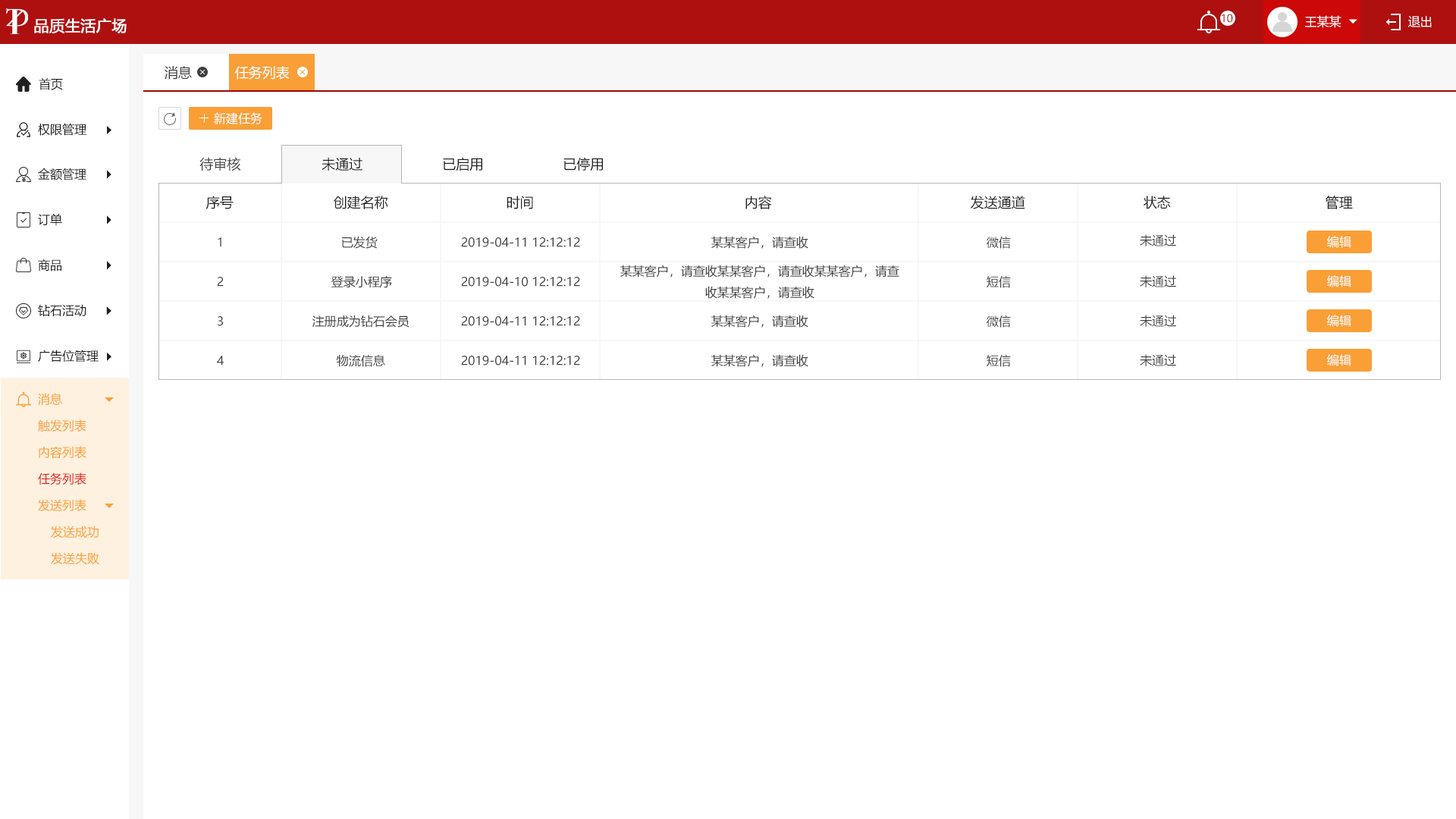
<style>
.page{position:relative;width:1456px;height:819px;background:#ffffff}
.page>*{position:absolute;margin:0}
.t1{font:10.6px "MicrosoftYaHei";color:#9c0606;text-transform:uppercase}
.t2{font:12.1px "MicrosoftYaHei";color:#ffffff;text-transform:uppercase}
.t3{font:15.2px "MicrosoftYaHei";color:#ffffff;text-transform:uppercase;font-weight:bold}
.t4{font:13.6px "MicrosoftYaHei";color:#404040;text-transform:uppercase}
.t5{font:13.6px "MicrosoftYaHei";color:#ffffff;text-transform:uppercase}
.t6{font:12.1px "MicrosoftYaHei";color:#202020;text-transform:uppercase}
.t7{font:13.6px "MicrosoftYaHei";color:#202020;text-transform:uppercase}
.t8{font:12.1px "MicrosoftYaHei";color:#404040;text-transform:uppercase}
.t9{font:12.1px "MicrosoftYaHei";color:#f99f36;text-transform:uppercase}
.t10{font:12.1px "MicrosoftYaHei";color:#e61f18;text-transform:uppercase}
</style>
<div class="page">
<p class="t1" style="left:1222px;top:14px;width:11px;height:9px">10</p>
<p class="t2" style="left:1305px;top:15px;width:36px;height:13px">王某某</p>
<p class="t2" style="left:1408px;top:16px;width:24px;height:11px">退出</p>
<p class="t3" style="left:34px;top:18px;width:93px;height:15px">品质生活广场</p>
<p class="t4" style="left:165px;top:66px;width:27px;height:14px">消息</p>
<p class="t5" style="left:234px;top:66px;width:56px;height:14px">任务列表</p>
<p class="t6" style="left:39px;top:78px;width:24px;height:12px">首页</p>
<p class="t2" style="left:214px;top:112px;width:48px;height:13px">新建任务</p>
<p class="t6" style="left:38px;top:123px;width:48px;height:13px">权限管理</p>
<p class="t4" style="left:199px;top:157px;width:42px;height:14px">待审核</p>
<p class="t7" style="left:322px;top:157px;width:40px;height:14px">未通过</p>
<p class="t7" style="left:443px;top:157px;width:39px;height:14px">已启用</p>
<p class="t7" style="left:563px;top:157px;width:40px;height:14px">已停用</p>
<p class="t6" style="left:38px;top:168px;width:48px;height:12px">金额管理</p>
<p class="t7" style="left:206px;top:196px;width:28px;height:13px">序号</p>
<p class="t7" style="left:334px;top:196px;width:54px;height:13px">创建名称</p>
<p class="t7" style="left:507px;top:196px;width:26px;height:13px">时间</p>
<p class="t7" style="left:745px;top:196px;width:27px;height:13px">内容</p>
<p class="t7" style="left:971px;top:196px;width:54px;height:13px">发送通道</p>
<p class="t7" style="left:1143px;top:196px;width:28px;height:13px">状态</p>
<p class="t7" style="left:1326px;top:196px;width:27px;height:13px">管理</p>
<p class="t6" style="left:38px;top:213px;width:24px;height:13px">订单</p>
<p class="t8" style="left:218px;top:237px;width:3px;height:10px">1</p>
<p class="t8" style="left:342px;top:236px;width:36px;height:13px">已发货</p>
<p class="t8" style="left:461px;top:237px;width:119px;height:10px">2019-04-11 12:12:12</p>
<p class="t8" style="left:711px;top:236px;width:97px;height:13px">某某客户，请查收</p>
<p class="t8" style="left:987px;top:236px;width:24px;height:13px">微信</p>
<p class="t8" style="left:1140px;top:234px;width:36px;height:12px">未通过</p>
<p class="t2" style="left:1327px;top:236px;width:24px;height:12px">编辑</p>
<p class="t6" style="left:38px;top:259px;width:23px;height:12px">商品</p>
<p class="t8" style="left:620px;top:265px;width:279px;height:34px;text-align:center">某某客户，请查收某某客户，请查收某某客户，请查<br>收某某客户，请查收</p>
<p class="t8" style="left:217px;top:277px;width:7px;height:10px">2</p>
<p class="t8" style="left:331px;top:275px;width:61px;height:13px">登录小程序</p>
<p class="t8" style="left:461px;top:277px;width:119px;height:10px">2019-04-10 12:12:12</p>
<p class="t8" style="left:987px;top:275px;width:24px;height:13px">短信</p>
<p class="t8" style="left:1140px;top:275px;width:36px;height:12px">未通过</p>
<p class="t2" style="left:1327px;top:275px;width:24px;height:12px">编辑</p>
<p class="t6" style="left:38px;top:304px;width:48px;height:12px">钻石活动</p>
<p class="t8" style="left:218px;top:316px;width:5px;height:10px">3</p>
<p class="t8" style="left:312px;top:315px;width:97px;height:13px">注册成为钻石会员</p>
<p class="t8" style="left:461px;top:316px;width:119px;height:10px">2019-04-11 12:12:12</p>
<p class="t8" style="left:711px;top:315px;width:97px;height:13px">某某客户，请查收</p>
<p class="t8" style="left:987px;top:315px;width:24px;height:13px">微信</p>
<p class="t8" style="left:1140px;top:315px;width:36px;height:12px">未通过</p>
<p class="t2" style="left:1327px;top:315px;width:24px;height:12px">编辑</p>
<p class="t6" style="left:38px;top:350px;width:61px;height:12px">广告位管理</p>
<p class="t8" style="left:217px;top:356px;width:7px;height:10px">4</p>
<p class="t8" style="left:336px;top:354px;width:49px;height:13px">物流信息</p>
<p class="t8" style="left:461px;top:356px;width:119px;height:10px">2019-04-11 12:12:12</p>
<p class="t8" style="left:711px;top:354px;width:97px;height:13px">某某客户，请查收</p>
<p class="t8" style="left:987px;top:354px;width:24px;height:13px">短信</p>
<p class="t8" style="left:1140px;top:354px;width:36px;height:12px">未通过</p>
<p class="t2" style="left:1327px;top:354px;width:24px;height:12px">编辑</p>
<p class="t9" style="left:38px;top:393px;width:24px;height:12px">消息</p>
<p class="t9" style="left:38px;top:419px;width:48px;height:12px">触发列表</p>
<p class="t9" style="left:39px;top:446px;width:47px;height:13px">内容列表</p>
<p class="t10" style="left:38px;top:472px;width:48px;height:13px">任务列表</p>
<p class="t9" style="left:38px;top:499px;width:48px;height:12px">发送列表</p>
<p class="t9" style="left:51px;top:526px;width:48px;height:12px">发送成功</p>
<p class="t9" style="left:51px;top:552px;width:48px;height:13px">发送失败</p>
</div>
